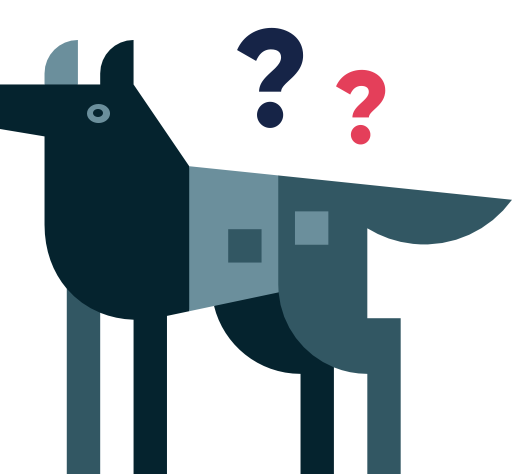
<style>
.page{position:relative;width:512px;height:474px;background:#ffffff}
.page>*{position:absolute;margin:0}
.t1{font:137.4px "Gilroy-ExtraBold";color:#162447}
.t2{font:102.4px "Gilroy-ExtraBold";color:#e43f5a}
</style>
<div class="page">
<p class="t1" style="left:237px;top:27px;width:67px;height:101px">?</p>
<p class="t2" style="left:336px;top:69px;width:50px;height:76px">?</p>
</div>
